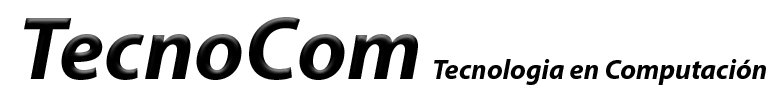
<style>
.page{position:relative;width:780px;height:98px;background:#ffffff}
.page>*{position:absolute;margin:0}
.t1{font:90px "MyriadPro-BoldIt";color:#000000}
.t2{font:28px "MyriadPro-BoldIt";color:#010101}
</style>
<div class="page">
<p class="t1" style="left:24px;top:17px;width:394px;height:63px">TecnoCom</p>
<p class="t2" style="left:434px;top:59px;width:332px;height:26px">Tecnologia en Computación</p>
</div>
